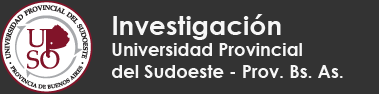
<style>
.page{position:relative;width:379px;height:94px;background:#333333}
.page>*{position:absolute;margin:0}
.t1{font:18px "CenturyGothic-Bold";color:#f6f6f6}
.t2{font:26.3px "CenturyGothic-Bold";color:#f6f6f6}
</style>
<div class="page">
<p class="t1" style="left:112px;top:14px;width:231px;height:64px;text-align:justify"><span class="t2">Investigación<br></span>Universidad Provincial<br>del Sudoeste - Prov. Bs. As.</p>
</div>
